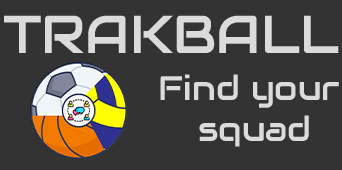
<style>
.page{position:relative;width:342px;height:170px;background:#333333}
.page>*{position:absolute;margin:0}
.t1{font:53.3px "Audiowide-Regular";color:#dbdbdb}
.t2{font:34px "Audiowide-Regular";color:#dbdbdb}
</style>
<div class="page">
<p class="t1" style="left:4px;top:15px;width:335px;height:38px">TRAKBALL</p>
<p class="t2" style="left:160px;top:74px;width:179px;height:73px;text-align:center">Find your <br>squad</p>
</div>
